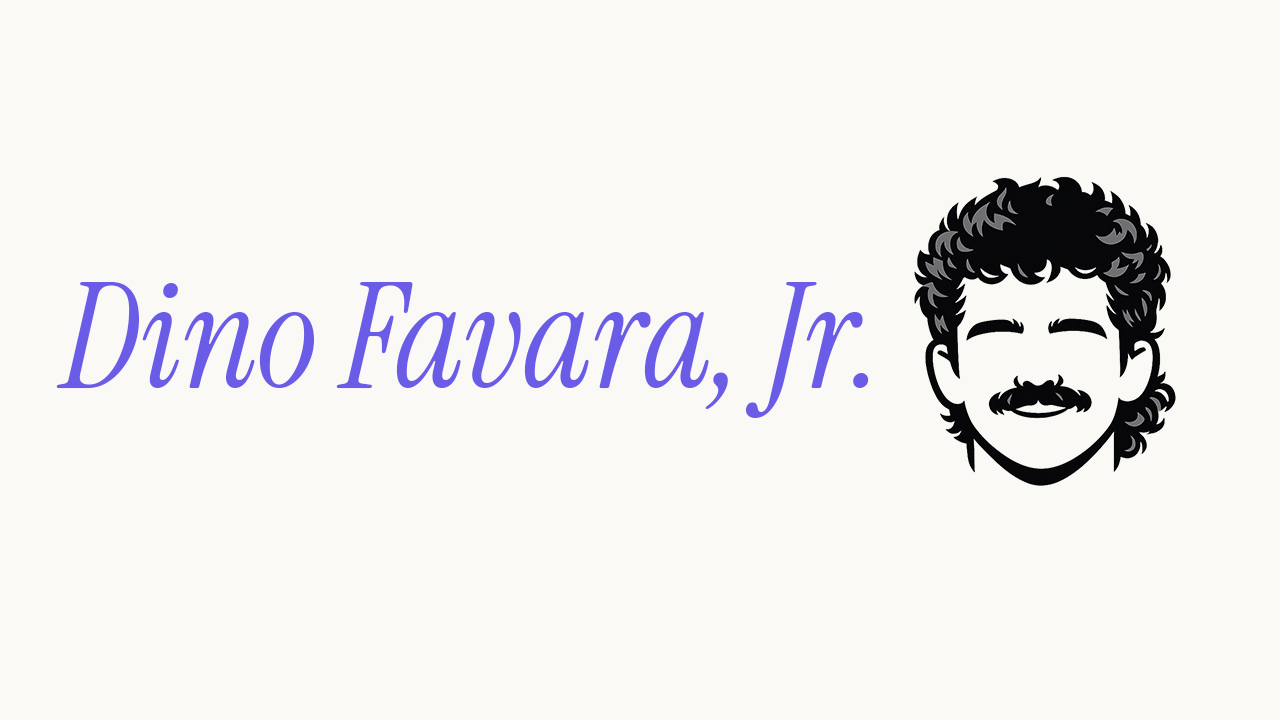
<style>
.page{position:relative;width:1280px;height:720px;background:#faf9f5}
.page>*{position:absolute;margin:0}
.t1{font:145.1px "InstrumentSerif-Italic";color:#6b5ce7}
</style>
<div class="page">
<p class="t1" style="left:56px;top:282px;width:813px;height:136px">Dino Favara, Jr.</p>
</div>
